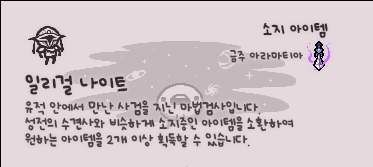
<style>
.page{position:relative;width:373px;height:167px;background:#e5d9de}
.page>*{position:absolute;margin:0}
.t1{font:12px "UhBeeSe_hyunBold";color:#372b2d}
.t2{font:12px "UhBeeSe_hyunBold";letter-spacing:-0.1em;color:#372b2d}
.t3{font:10px "UhBeeSe_hyunBold";color:#4c4442}
.t4{font:11px/16px "UhBeeSe_hyunBold";letter-spacing:-0.025em;color:#4c4442}
.t5{font:16px/23px "UhBeeSe_hyunBold";color:#372b2d}
.t6{font:16px/23px "UhBeeSe_hyunBold";letter-spacing:-0.1em;color:#372b2d}
.t7{font:16px/23px "UhBeeSe_hyun";color:#372b2d}
</style>
<div class="page">
<p class="t1" style="left:263px;top:23px;width:65px;height:15px"><span class="t2">소</span>지 아이템</p>
<p class="t3" style="left:230px;top:49px;width:73px;height:14px">금주 아라마티아</p>
<p class="t4" style="left:25px;top:74px;width:269px;height:74px"><span class="t5">일</span><span class="t6">리</span><span class="t7">걸</span><span class="t5"> 나이트 <br></span>유적 안에서 만난 사검을 지닌 마법검사입니다.<br>성전의 수견사와 비슷하게 소지중인 아이템을 소환하여 <br>원하는 아이템을 2개 이상 획득할 수 있습니다.</p>
</div>
